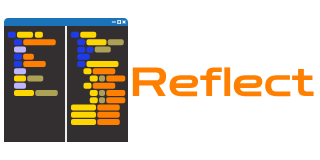
<style>
.page{position:relative;width:320px;height:160px;background:#ffffff}
.page>*{position:absolute;margin:0}
.t1{font:40px "ZenDots-Regular";color:#ff8000}
</style>
<div class="page">
<p class="t1" style="left:132px;top:67px;width:182px;height:30px">Reflect</p>
</div>
